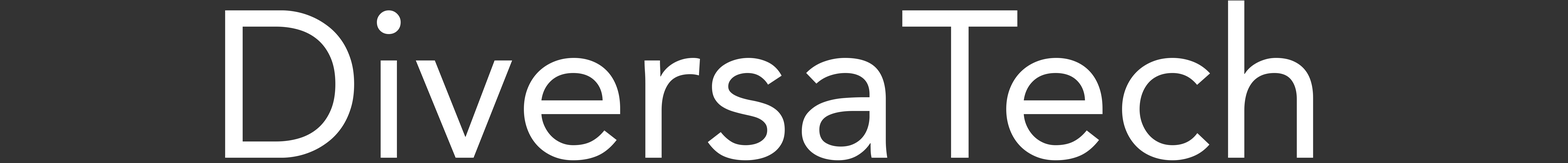
<style>
.page{position:relative;width:1568px;height:163px;background:#333333}
.page>*{position:absolute;margin:0}
.t1{font:208.2px "Avenir-Roman";color:#ffffff}
</style>
<div class="page">
<p class="t1" style="left:225px;top:0px;width:1088px;height:161px">DiversaTech</p>
</div>
